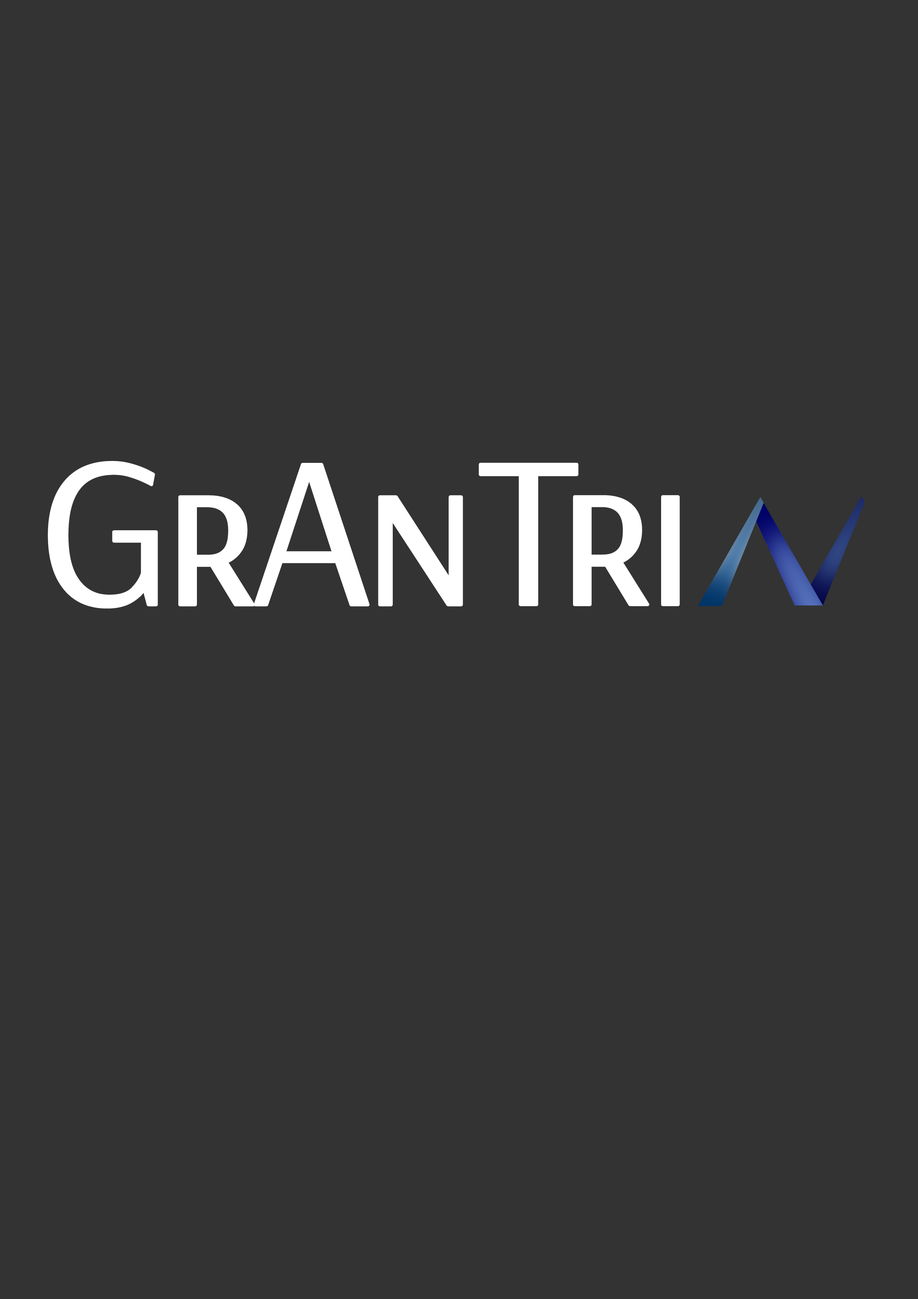
<style>
.page{position:relative;width:918px;height:1299px;background:#333333}
.page>*{position:absolute;margin:0}
.t1{font:216px "Arsenal-Regular";letter-spacing:-0.05em;color:#ffffff;font-variant:small-caps}
.t2{font:216px "Arsenal-Regular";letter-spacing:-0.05em;color:#ffffff}
</style>
<div class="page">
<p class="t1" style="left:49px;top:462px;width:413px;height:145px"><span class="t2">G</span>rAn</p>
<p class="t1" style="left:480px;top:464px;width:199px;height:141px">Tri</p>
</div>
